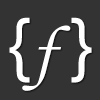
<style>
.page{position:relative;width:100px;height:100px;background:#333333}
.page>*{position:absolute;margin:0}
.t1{font:68.9px "ArialMT";color:#ffffff}
.t2{font:68.9px "MonotypeCorsiva";color:#ffffff}
</style>
<div class="page">
<p class="t1" style="left:9px;top:17px;width:21px;height:66px">{</p>
<p class="t1" style="left:71px;top:17px;width:21px;height:66px;rotate:180deg">{</p>
<p class="t2" style="left:22px;top:25px;width:49px;height:66px">f</p>
</div>
